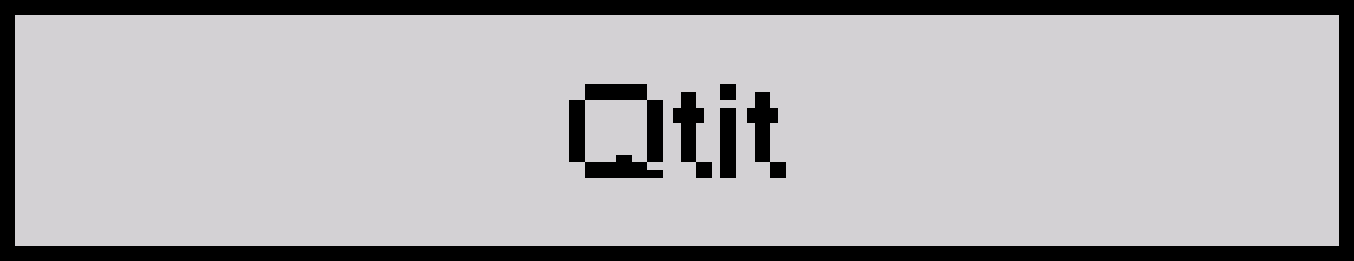
<style>
.page{position:relative;width:1354px;height:261px;background:#d3d1d4}
.page>*{position:absolute;margin:0}
.t1{font:125.3px "Minecraft";color:#000000}
</style>
<div class="page">
<p class="t1" style="left:569px;top:84px;width:217px;height:94px">Qtit</p>
</div>
